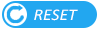
<style>
.page{position:relative;width:100px;height:30px;background:#22a7f0}
.page>*{position:absolute;margin:0}
.t1{font:16.2px "Calibri-Italic";color:#ffffff;scale:1.08 1}
</style>
<div class="page">
<p class="t1" style="left:34px;top:9px;width:44px;height:12px">RESET</p>
</div>
